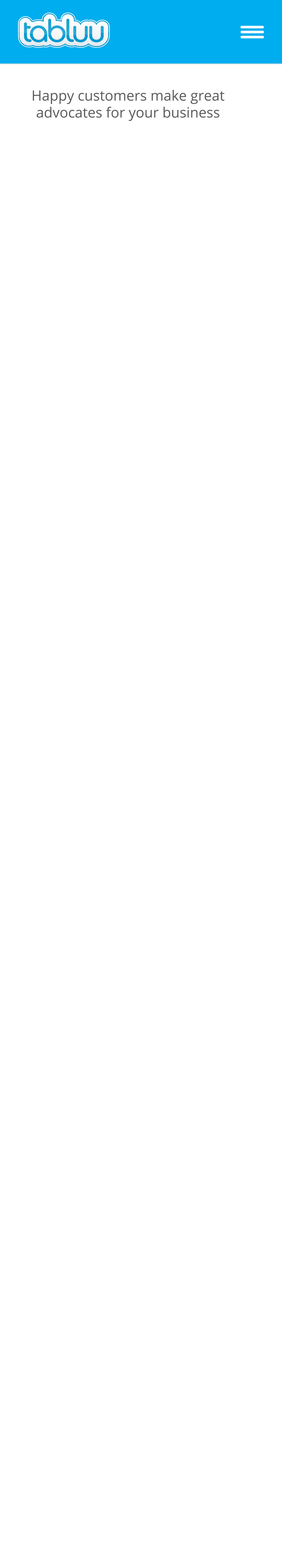
<style>
.page{position:relative;width:282px;height:1568px;background:#ffffff}
.page>*{position:absolute;margin:0}
.t1{font:14.1px "OpenSans";color:#5f5f5f}
</style>
<div class="page">
<p class="t1" style="left:33px;top:90px;width:192px;height:31px;text-align:center">Happy customers make great<br>advocates for your business</p>
</div>
